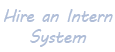
<style>
.page{position:relative;width:115px;height:52px;background:#ffffff}
.page>*{position:absolute;margin:0}
.t1{font:18px "MVBoli";letter-spacing:-0.05em;color:#b0bed8}
</style>
<div class="page">
<p class="t1" style="left:4px;top:9px;width:109px;height:38px;text-align:center">Hire an Intern System</p>
</div>
